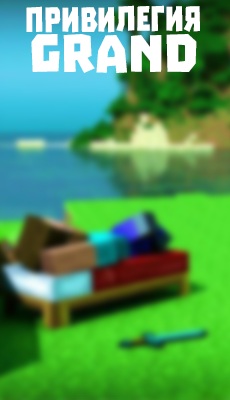
<style>
.page{position:relative;width:230px;height:400px}
.page>*{position:absolute;margin:0}
.t1{font:39.7px "Troika";color:#ffffff;scale:0.78 1}
.t2{font:59.8px "Troika";color:#ffffff}
</style>
<div class="page">
<p class="t1" style="left:26px;top:5px;width:174px;height:28px">привилегия</p>
<p class="t2" style="left:31px;top:34px;width:166px;height:39px">GRAND</p>
</div>
